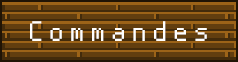
<style>
.page{position:relative;width:238px;height:62px;background:#623e0f}
.page>*{position:absolute;margin:0}
.t1{font:34.9px "Nine-By-Five-NBP";letter-spacing:0.2em;color:#ffffff;scale:1.03 1}
</style>
<div class="page">
<p class="t1" style="left:30px;top:21px;width:177px;height:20px">Commandes</p>
</div>
